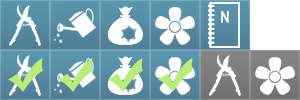
<style>
.page{position:relative;width:300px;height:100px;background:#ffffff}
.page>*{position:absolute;margin:0}
.t1{font:16.5px "ArialNarrow";color:#ffffff;font-weight:bold;scale:0.91 1}
</style>
<div class="page">
<p class="t1" style="left:221px;top:11px;width:8px;height:12px">N</p>
</div>
